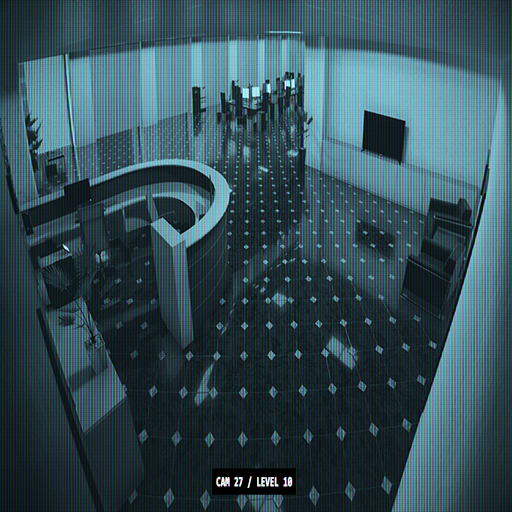
<style>
.page{position:relative;width:512px;height:512px}
.page>*{position:absolute;margin:0}
.t1{font:13.7px "Consolas-Bold";color:#ffffff;font-weight:bold;scale:0.56 1}
</style>
<div class="page">
<p class="t1" style="left:216px;top:476px;width:77px;height:12px">CAM 27 / LEVEL 10</p>
</div>
